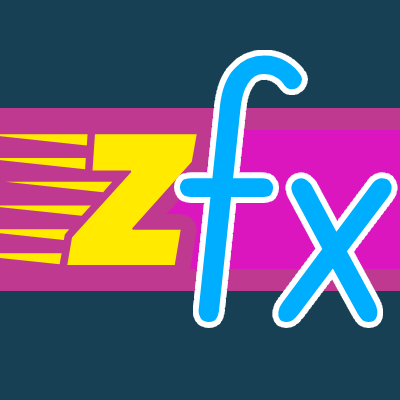
<style>
.page{position:relative;width:400px;height:400px;background:#184055}
.page>*{position:absolute;margin:0}
.t1{font:345.3px "EduSABeginner-Regular";color:#00aeff}
</style>
<div class="page">
<p class="t1" style="left:180px;top:55px;width:212px;height:267px">fx</p>
</div>
